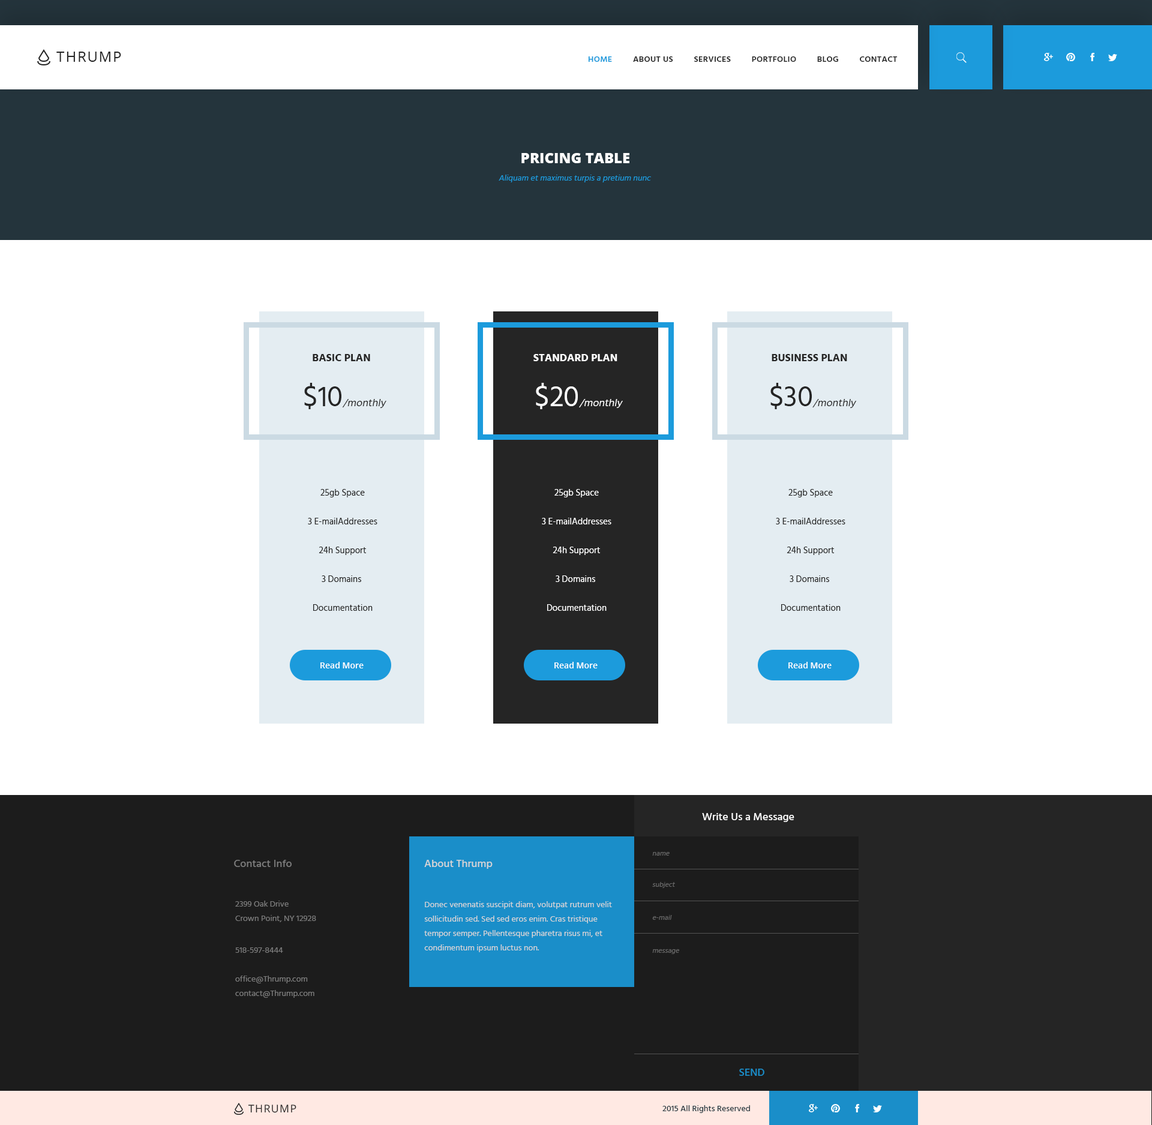
<style>
.page{position:relative;width:1152px;height:1125px;background:#ffffff}
.page>*{position:absolute;margin:0}
.t1{font:14.4px "OpenSans";letter-spacing:0.075em;color:#252525;text-transform:uppercase}
.t2{font:8.4px "Hind-Semibold";letter-spacing:0.025em;color:#252525;text-transform:uppercase}
.t3{font:8.4px "Hind-Semibold";letter-spacing:0.025em;color:#1c9bdc;text-transform:uppercase}
.t4{font:14.4px "OpenSans-Extrabold";color:#ffffff;text-transform:uppercase}
.t5{font:8.4px "Hind-Regular";color:#1c9bdc;font-style:italic}
.t6{font:10.8px "Hind-Bold";color:#252525;text-transform:uppercase}
.t7{font:10.8px "Hind-Bold";color:#ffffff;text-transform:uppercase}
.t8{font:10.8px "Hind-Regular";color:#252525;font-style:italic}
.t9{font:28.8px "Hind-Regular";color:#252525;text-transform:uppercase}
.t10{font:10.8px "Hind-Regular";color:#ffffff;font-style:italic}
.t11{font:28.8px "Hind-Regular";color:#ffffff;text-transform:uppercase}
.t12{font:9px/28.8px "Hind-Regular";color:#252525}
.t13{font:9px/28.8px "Hind-Regular";color:#ffffff}
.t14{font:8.4px "OpenSans-Semibold";color:#ffffff}
.t15{font:10.8px "Hind-Medium";color:#ffffff}
.t16{font:7.2px "Hind-Regular";color:#686868;font-style:italic}
.t17{font:10.8px "Hind-Medium";color:#7b7b7b}
.t18{font:10.8px "Hind-Medium";color:#d6d6d6}
.t19{font:8.4px/14.4px "Hind-Regular";color:#7b7b7b}
.t20{font:8.4px/14.4px "Hind-Regular";color:#d6d6d6}
.t21{font:8.4px "Hind-Regular";color:#7b7b7b}
.t22{font:10.8px "Hind-Medium";color:#1a8ec9}
.t23{font:10.7px "OpenSans";letter-spacing:0.075em;color:#252525;text-transform:uppercase}
.t24{font:8.4px "Hind-Medium";color:#273941}
</style>
<div class="page">
<p class="t1" style="left:56px;top:52px;width:65px;height:10px">Thrump</p>
<p class="t2" style="left:588px;top:56px;width:310px;height:6px"><span class="t3">Home</span>         About Us         Services         Portfolio         Blog         Contact</p>
<p class="t4" style="left:521px;top:153px;width:108px;height:10px">pricing table</p>
<p class="t5" style="left:499px;top:175px;width:152px;height:7px">Aliquam et maximus turpis a pretium nunc</p>
<p class="t6" style="left:313px;top:354px;width:57px;height:7px">Basic Plan</p>
<p class="t7" style="left:533px;top:354px;width:84px;height:7px">standard Plan</p>
<p class="t6" style="left:772px;top:354px;width:75px;height:7px">business Plan</p>
<p class="t8" style="left:304px;top:383px;width:82px;height:26px"><span class="t9">$10</span>/monthly</p>
<p class="t10" style="left:536px;top:383px;width:87px;height:26px"><span class="t11">$20</span>/monthly</p>
<p class="t8" style="left:770px;top:383px;width:87px;height:26px"><span class="t9">$30</span>/monthly</p>
<p class="t12" style="left:308px;top:489px;width:69px;height:122px;text-align:center">25gb Space<br>3 E-mailAddresses<br>24h Support<br>3 Domains <br>Documentation</p>
<p class="t13" style="left:542px;top:489px;width:69px;height:122px;text-align:center">25gb Space<br>3 E-mailAddresses<br>24h Support<br>3 Domains <br>Documentation</p>
<p class="t12" style="left:776px;top:489px;width:69px;height:122px;text-align:center">25gb Space<br>3 E-mailAddresses<br>24h Support<br>3 Domains <br>Documentation</p>
<p class="t14" style="left:320px;top:662px;width:44px;height:6px">Read More</p>
<p class="t14" style="left:554px;top:662px;width:44px;height:6px">Read More</p>
<p class="t14" style="left:788px;top:662px;width:44px;height:6px">Read More</p>
<p class="t15" style="left:702px;top:813px;width:92px;height:9px">Write Us a Message</p>
<p class="t16" style="left:652px;top:852px;width:18px;height:4px">name</p>
<p class="t17" style="left:234px;top:860px;width:58px;height:7px">Contact Info</p>
<p class="t18" style="left:424px;top:860px;width:69px;height:9px">About Thrump</p>
<p class="t16" style="left:652px;top:882px;width:23px;height:6px">subject</p>
<p class="t19" style="left:235px;top:901px;width:81px;height:21px">2399 Oak Drive<br>Crown Point, NY 12928</p>
<p class="t20" style="left:424px;top:901px;width:188px;height:51px">Donec venenatis suscipit diam, volutpat rutrum velit sollicitudin sed. Sed sed eros enim. Cras tristique tempor semper. Pellentesque pharetra risus mi, et condimentum ipsum luctus non.</p>
<p class="t16" style="left:652px;top:915px;width:20px;height:5px">e-mail</p>
<p class="t21" style="left:235px;top:947px;width:48px;height:6px">518-597-8444</p>
<p class="t16" style="left:652px;top:949px;width:27px;height:5px">message</p>
<p class="t19" style="left:235px;top:976px;width:79px;height:22px">office@Thrump.com<br>contact@Thrump.com</p>
<p class="t22" style="left:739px;top:1069px;width:25px;height:7px">SEND</p>
<p class="t23" style="left:248px;top:1105px;width:48px;height:8px">Thrump</p>
<p class="t24" style="left:662px;top:1105px;width:88px;height:8px">2015 All Rights Reserved</p>
</div>
